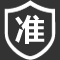
<style>
.page{position:relative;width:60px;height:60px;background:#333333}
.page>*{position:absolute;margin:0}
.t1{font:30px "MicrosoftYaHei-Bold";color:#ffffff}
</style>
<div class="page">
<p class="t1" style="left:15px;top:14px;width:30px;height:30px">准</p>
</div>
